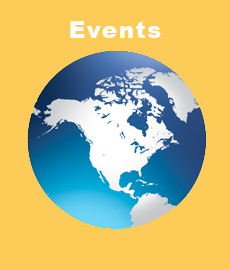
<style>
.page{position:relative;width:230px;height:270px;background:#fdcb58}
.page>*{position:absolute;margin:0}
.t1{font:23px "Arial-Black";letter-spacing:0.065em;color:#ffffff}
</style>
<div class="page">
<p class="t1" style="left:70px;top:21px;width:91px;height:17px">Events</p>
</div>
